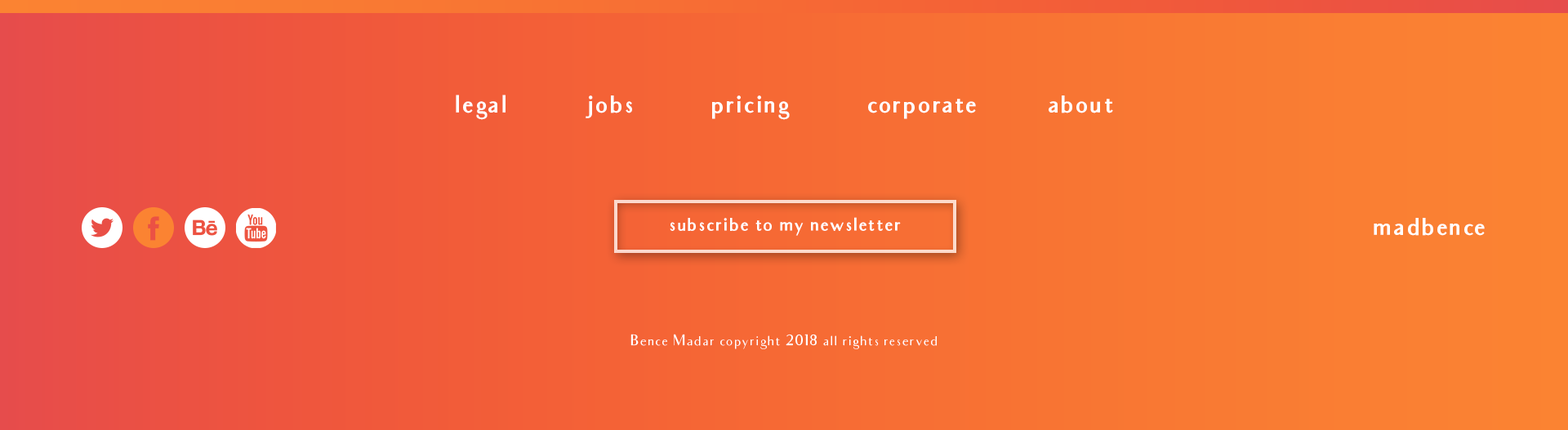
<style>
.page{position:relative;width:1568px;height:430px}
.page>*{position:absolute;margin:0}
.t1{font:26.1px "Audrey-Bold";color:#ffffff}
.t2{font:19.6px "Audrey-Bold";color:#ffffff}
.t3{font:14.7px "Audrey-Normal";color:#ffffff}
</style>
<div class="page">
<p class="t1" style="left:456px;top:95px;width:657px;height:25px">legal           jobs           pricing           corporate          about</p>
<p class="t2" style="left:670px;top:217px;width:231px;height:19px">subscribe to my newsletter</p>
<p class="t1" style="left:1374px;top:218px;width:111px;height:18px">madbence</p>
<p class="t3" style="left:630px;top:334px;width:307px;height:16px">Bence Madar copyright 2018 all rights reserved</p>
</div>
